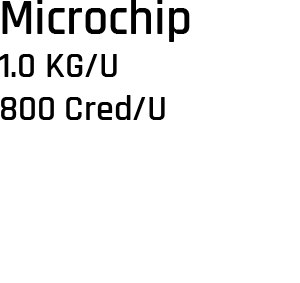
<style>
.page{position:relative;width:300px;height:283px;background:#ffffff}
.page>*{position:absolute;margin:0}
.t1{font:36px "Rajdhani-SemiBold";color:#000000}
.t2{font:50px "Rajdhani-SemiBold";color:#000000}
</style>
<div class="page">
<p class="t1" style="left:0px;top:0px;width:190px;height:120px"><span class="t2">Microchip<br></span>1.0 KG/U<br>800 Cred/U</p>
</div>
